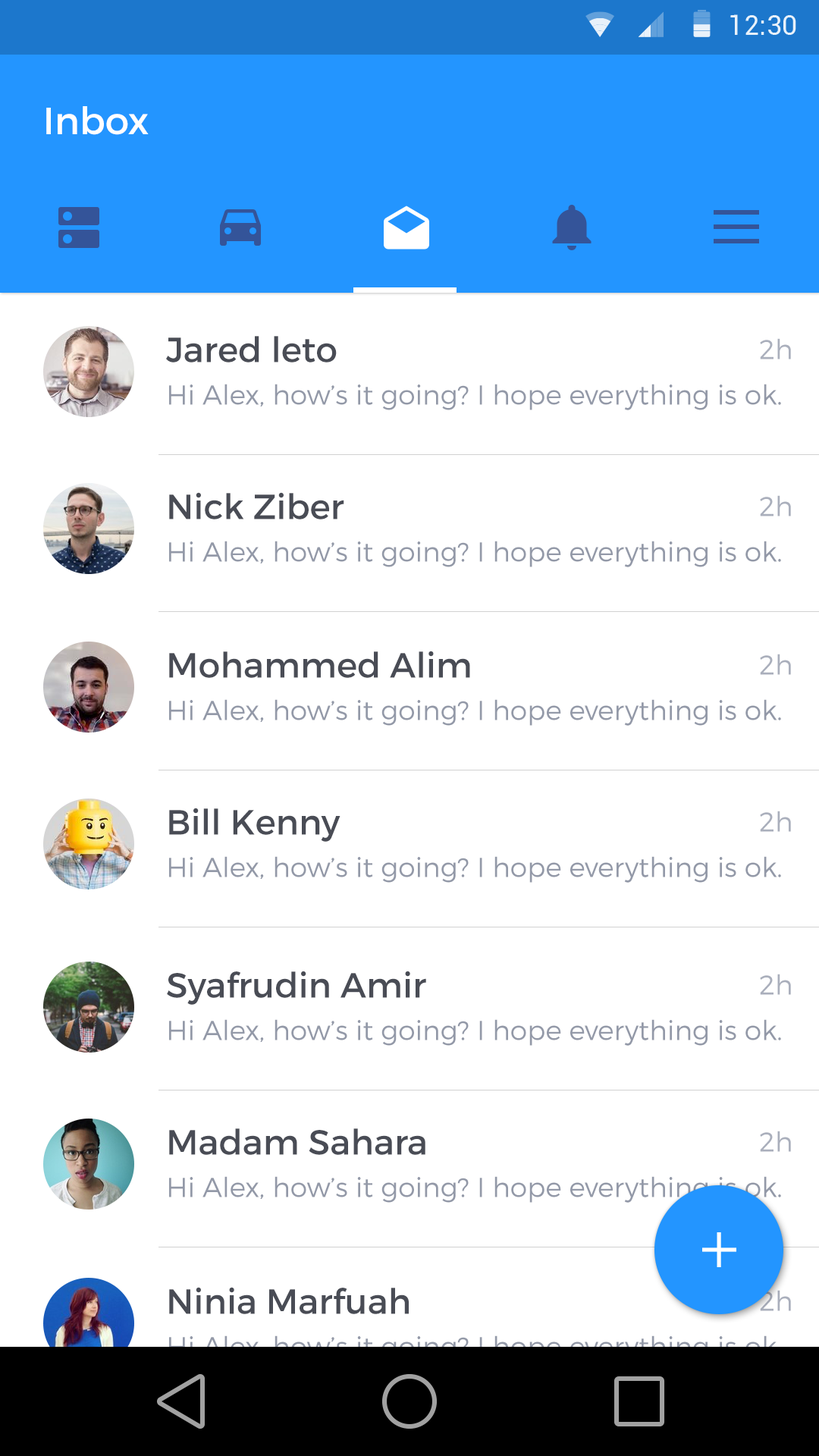
<style>
.page{position:relative;width:819px;height:1456px;background:#ffffff}
.page>*{position:absolute;margin:0}
.t1{font:37.9px "Montserrat-Regular";color:#ffffff}
.t2{font:34.9px "Montserrat-Regular";color:#494c55}
.t3{font:27.3px "Montserrat-Light";color:#aaafbc}
.t4{font:27.3px "Montserrat-Light";color:#9399a8}
</style>
<div class="page">
<p class="t1" style="left:46px;top:106px;width:103px;height:29px">Inbox</p>
<p class="t2" style="left:166px;top:336px;width:171px;height:26px">Jared leto</p>
<p class="t3" style="left:760px;top:338px;width:31px;height:21px">2h</p>
<p class="t4" style="left:169px;top:384px;width:612px;height:26px">Hi Alex, how’s it going? I hope everything is ok.</p>
<p class="t2" style="left:169px;top:492px;width:175px;height:27px">Nick Ziber</p>
<p class="t3" style="left:760px;top:495px;width:31px;height:21px">2h</p>
<p class="t4" style="left:169px;top:541px;width:612px;height:26px">Hi Alex, how’s it going? I hope everything is ok.</p>
<p class="t2" style="left:169px;top:651px;width:301px;height:27px">Mohammed Alim</p>
<p class="t3" style="left:760px;top:654px;width:31px;height:21px">2h</p>
<p class="t4" style="left:169px;top:699px;width:612px;height:27px">Hi Alex, how’s it going? I hope everything is ok.</p>
<p class="t2" style="left:169px;top:808px;width:171px;height:34px">Bill Kenny</p>
<p class="t3" style="left:760px;top:811px;width:31px;height:21px">2h</p>
<p class="t4" style="left:169px;top:856px;width:612px;height:27px">Hi Alex, how’s it going? I hope everything is ok.</p>
<p class="t2" style="left:167px;top:971px;width:259px;height:34px">Syafrudin Amir</p>
<p class="t3" style="left:760px;top:974px;width:31px;height:21px">2h</p>
<p class="t4" style="left:169px;top:1019px;width:612px;height:27px">Hi Alex, how’s it going? I hope everything is ok.</p>
<p class="t2" style="left:169px;top:1128px;width:256px;height:27px">Madam Sahara</p>
<p class="t3" style="left:760px;top:1131px;width:31px;height:21px">2h</p>
<p class="t4" style="left:169px;top:1176px;width:612px;height:27px">Hi Alex, how’s it going? I hope everything is ok.</p>
<p class="t2" style="left:169px;top:1287px;width:240px;height:27px">Ninia Marfuah</p>
<p class="t3" style="left:760px;top:1290px;width:31px;height:21px">2h</p>
</div>
